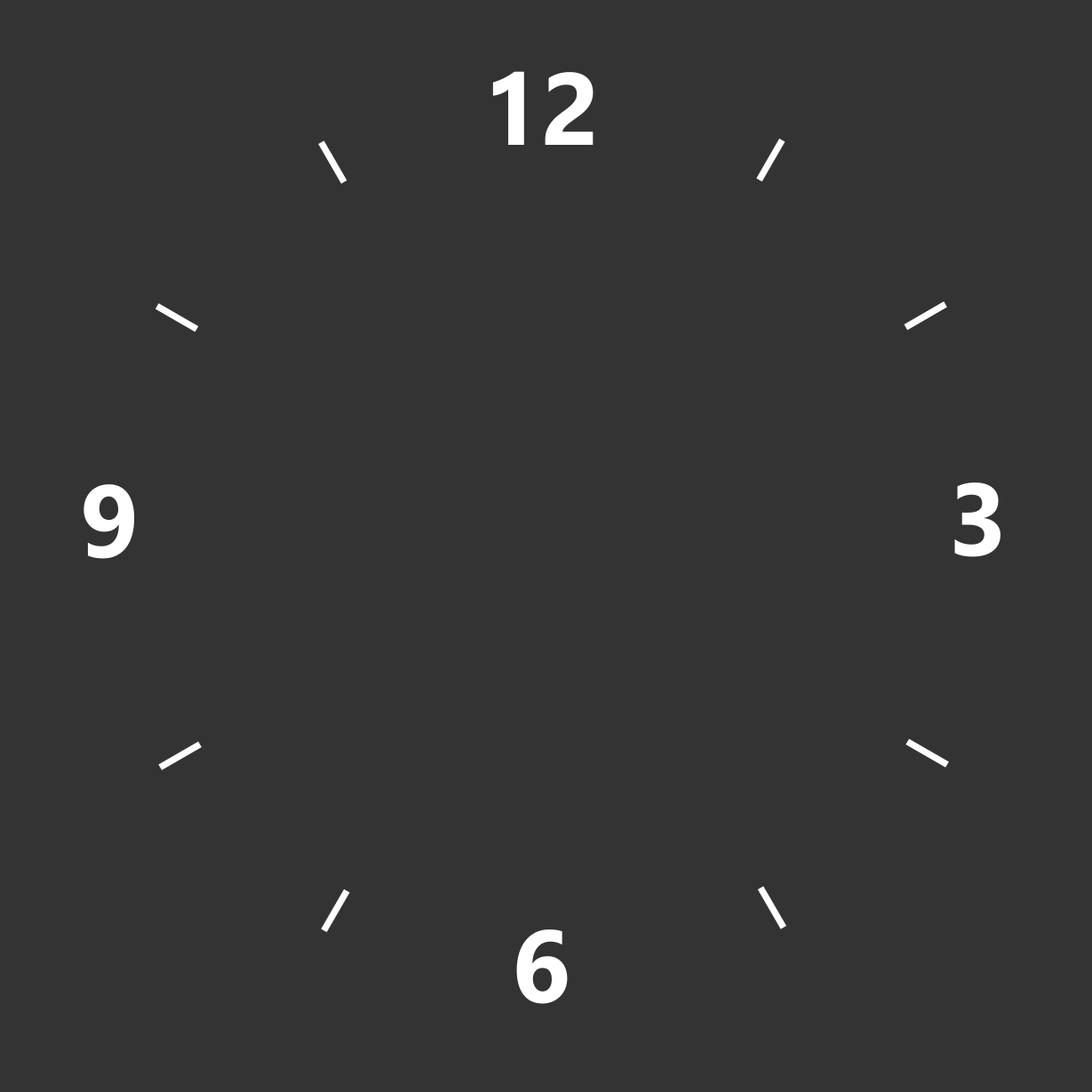
<style>
.page{position:relative;width:1092px;height:1092px;background:#333333}
.page>*{position:absolute;margin:0}
.t1{font:102.4px "Ebrima-Bold";color:#ffffff}
.t2{font:110.9px "Ebrima-Bold";color:#ffffff}
.t3{font:111.1px "Ebrima-Bold";color:#ffffff}
</style>
<div class="page">
<p class="t1" style="left:492px;top:71px;width:102px;height:74px">12</p>
<p class="t2" style="left:756px;top:138px;width:29px;height:44px;rotate:120deg">_</p>
<p class="t3" style="left:318px;top:140px;width:29px;height:44px;rotate:60deg">_</p>
<p class="t3" style="left:155px;top:303px;width:44px;height:29px;rotate:30deg">_</p>
<p class="t3" style="left:904px;top:301px;width:43px;height:30px;rotate:150deg">_</p>
<p class="t1" style="left:84px;top:484px;width:51px;height:75px">9</p>
<p class="t1" style="left:954px;top:482px;width:46px;height:75px">3</p>
<p class="t3" style="left:158px;top:741px;width:44px;height:29px;rotate:-30deg">_</p>
<p class="t2" style="left:905px;top:738px;width:44px;height:30px;rotate:-150deg">_</p>
<p class="t3" style="left:321px;top:889px;width:29px;height:44px;rotate:-60deg">_</p>
<p class="t3" style="left:757px;top:886px;width:29px;height:43px;rotate:-120deg">_</p>
<p class="t1" style="left:516px;top:929px;width:52px;height:75px">6</p>
</div>
